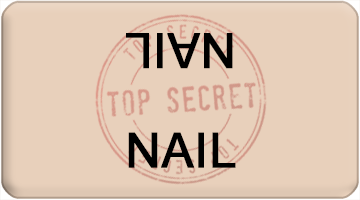
<style>
.page{position:relative;width:360px;height:200px;background:#e8d0bb}
.page>*{position:absolute;margin:0}
.t1{font:48px "ArialMT";color:#000000;font-weight:bold}
</style>
<div class="page">
<p class="t1" style="left:126px;top:33px;width:107px;height:36px;rotate:180deg">NAIL</p>
<p class="t1" style="left:128px;top:132px;width:108px;height:36px">NAIL</p>
</div>
